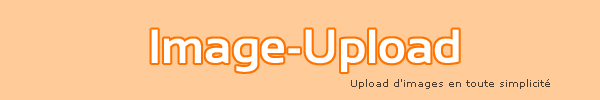
<style>
.page{position:relative;width:600px;height:100px;background:#ffcc99}
.page>*{position:absolute;margin:0}
.t1{font:10px "Verdana";color:#4c3d2e}
</style>
<div class="page">
<p class="t1" style="left:351px;top:79px;width:199px;height:10px">Upload d'images en toute simplicité</p>
</div>
